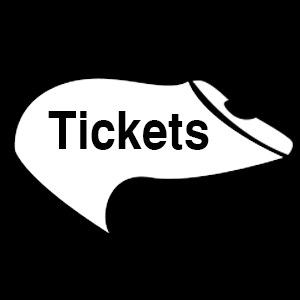
<style>
.page{position:relative;width:300px;height:300px;background:#000000}
.page>*{position:absolute;margin:0}
.t1{font:52px "SansSerifBold";color:#000000;scale:0.9 1}
</style>
<div class="page">
<p class="t1" style="left:48px;top:111px;width:161px;height:39px">Tickets</p>
</div>
